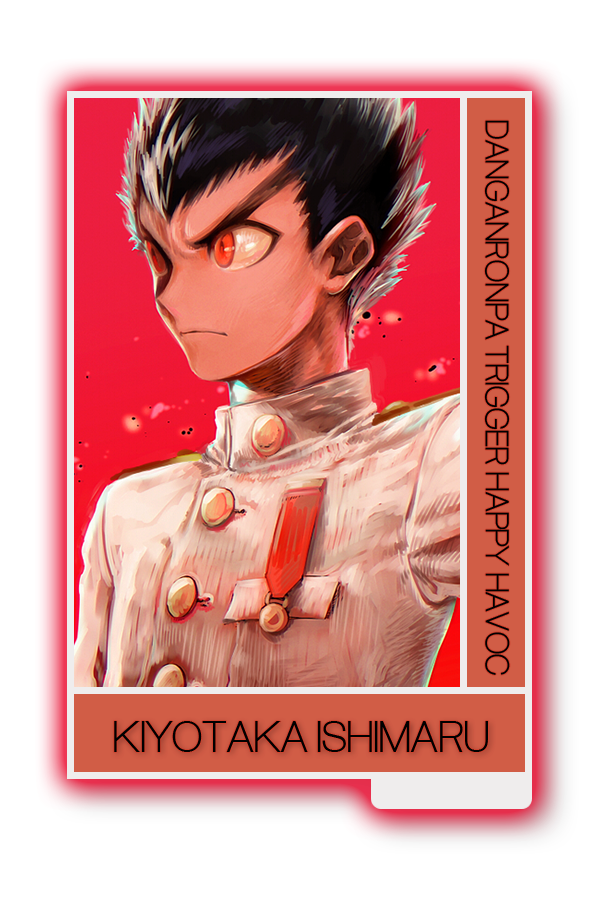
<style>
.page{position:relative;width:600px;height:900px;background:#ffffff}
.page>*{position:absolute;margin:0}
.t1{font:31.8px "Aliquam";color:#000000}
.t2{font:43.2px "Aliquam";color:#000000}
</style>
<div class="page">
<p class="t1" style="left:484px;top:120px;width:26px;height:555px;rotate:90deg">DANGANRONPA TRIGGER HAPPY HAVOC</p>
<p class="t2" style="left:114px;top:721px;width:374px;height:31px">KIYOTAKA ISHIMARU</p>
</div>
